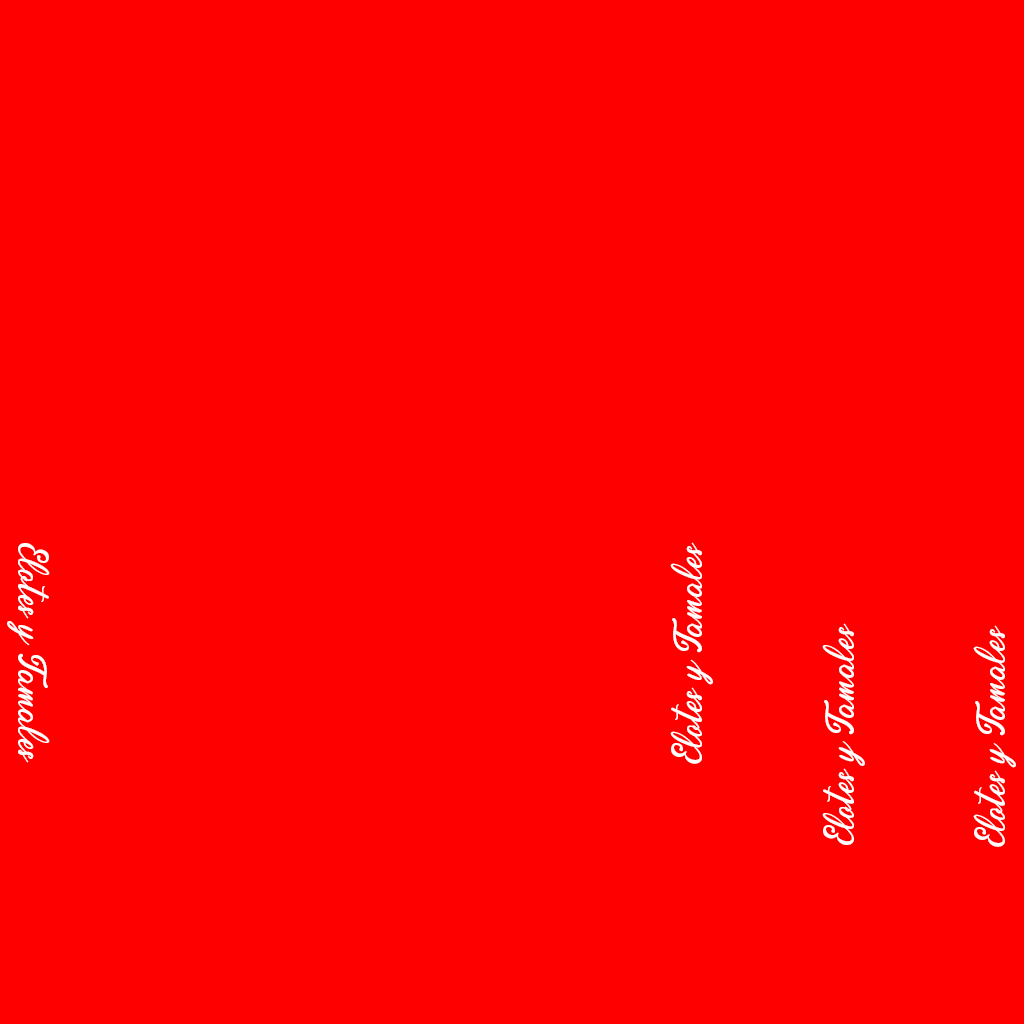
<style>
.page{position:relative;width:1024px;height:1024px;background:#ff0000}
.page>*{position:absolute;margin:0}
.t1{font:42px "Endolitta";color:#ffffff}
</style>
<div class="page">
<p class="t1" style="left:7px;top:543px;width:43px;height:220px;rotate:90deg">Elotes y Tamales</p>
<p class="t1" style="left:670px;top:542px;width:43px;height:222px;rotate:-90deg">Elotes y Tamales</p>
<p class="t1" style="left:822px;top:623px;width:43px;height:222px;rotate:-90deg">Elotes y Tamales</p>
<p class="t1" style="left:973px;top:625px;width:43px;height:222px;rotate:-90deg">Elotes y Tamales</p>
</div>
